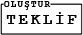
<style>
.page{position:relative;width:83px;height:35px;background:#ffffff}
.page>*{position:absolute;margin:0}
.t1{font:8.9px "CourierNewPS-BoldMT";letter-spacing:0.16em;color:#000000}
.t2{font:16px "CourierNewPS-BoldMT";letter-spacing:0.16em;color:#000000}
</style>
<div class="page">
<p class="t1" style="left:4px;top:1px;width:47px;height:9px">OLUŞTUR</p>
<p class="t2" style="left:6px;top:12px;width:71px;height:12px">TEKLİF</p>
</div>
